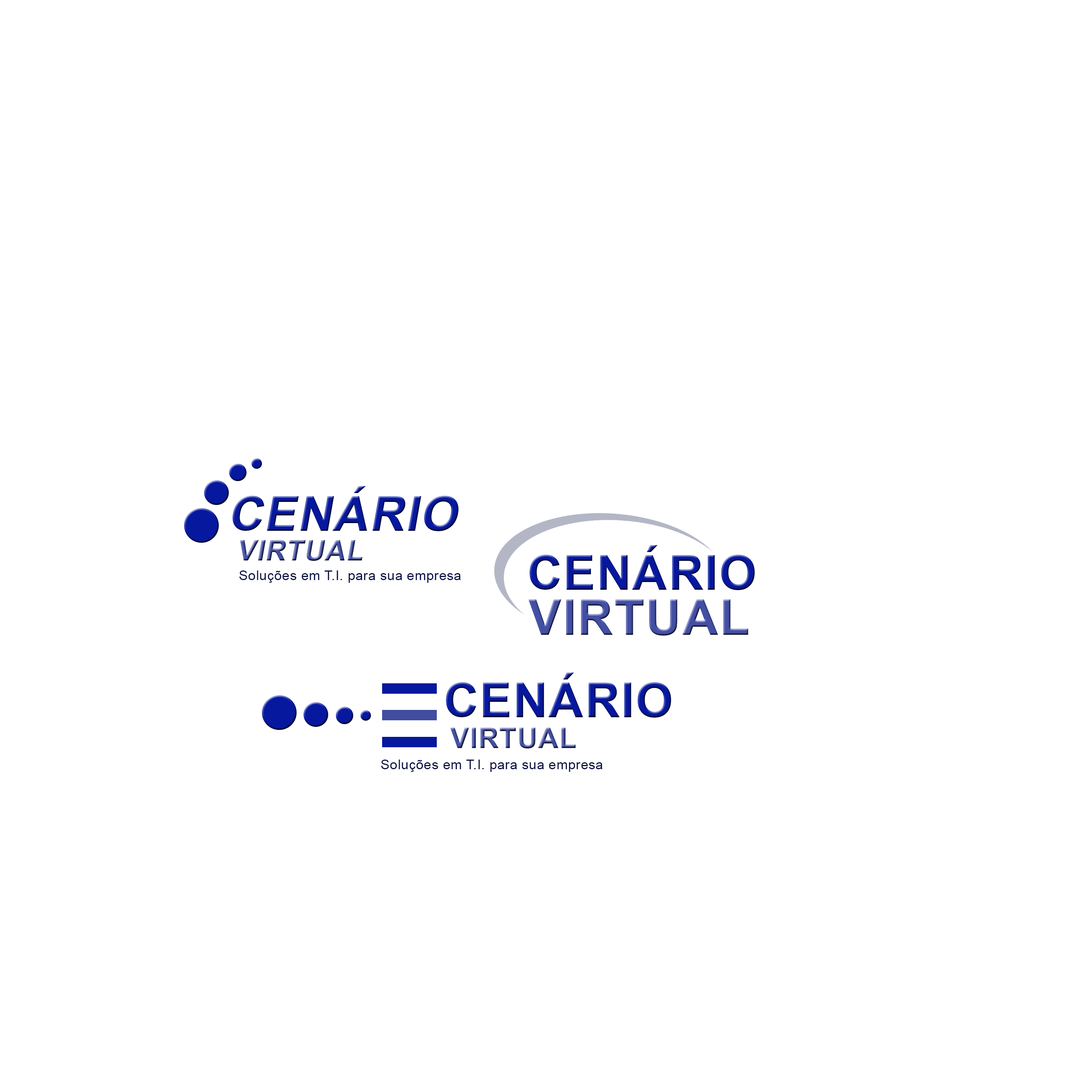
<style>
.page{position:relative;width:1092px;height:1092px;background:#ffffff}
.page>*{position:absolute;margin:0}
.t1{font:48.1px "Arial-BoldMT";letter-spacing:0.025em;font-style:italic}
.t2{font:28.1px "Arial-BoldMT";letter-spacing:0.025em;font-style:italic}
.t3{font:48.1px "Arial-BoldMT";letter-spacing:0.025em}
.t4{font:13.5px "ArialMT";letter-spacing:0.025em;color:#0b1243}
.t5{font:49.3px "Arial-BoldMT";letter-spacing:0.025em;color:#434fa5}
.t6{font:28.1px "Arial-BoldMT";letter-spacing:0.025em}
</style>
<div class="page">
<p class="t1" style="left:232px;top:486px;width:227px;height:45px">CENÁRIO</p>
<p class="t2" style="left:240px;top:540px;width:122px;height:21px">VIRTUAL</p>
<p class="t3" style="left:529px;top:545px;width:226px;height:45px">CENÁRIO</p>
<p class="t4" style="left:239px;top:570px;width:222px;height:13px">Soluções em T.I. para sua empresa</p>
<p class="t5" style="left:528px;top:599px;width:220px;height:37px">VIRTUAL</p>
<p class="t3" style="left:446px;top:673px;width:225px;height:45px">CENÁRIO</p>
<p class="t6" style="left:450px;top:728px;width:126px;height:20px">VIRTUAL</p>
<p class="t4" style="left:381px;top:760px;width:221px;height:12px">Soluções em T.I. para sua empresa</p>
</div>
